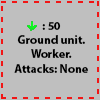
<style>
.page{position:relative;width:100px;height:100px;background:#bfbfbf}
.page>*{position:absolute;margin:0}
.t1{font:12px "MyriadPro-Bold";color:#000000}
</style>
<div class="page">
<p class="t1" style="left:14px;top:22px;width:74px;height:51px;text-align:center">: 50<br>Ground unit. Worker.<br>Attacks: None</p>
</div>
